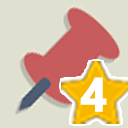
<style>
.page{position:relative;width:128px;height:128px;background:#e0e0d1}
.page>*{position:absolute;margin:0}
.t1{font:48px "Ebrima-Bold";color:#ffffff;font-weight:bold;scale:0.96 1}
</style>
<div class="page">
<p class="t1" style="left:80px;top:77px;width:27px;height:35px">4</p>
</div>
